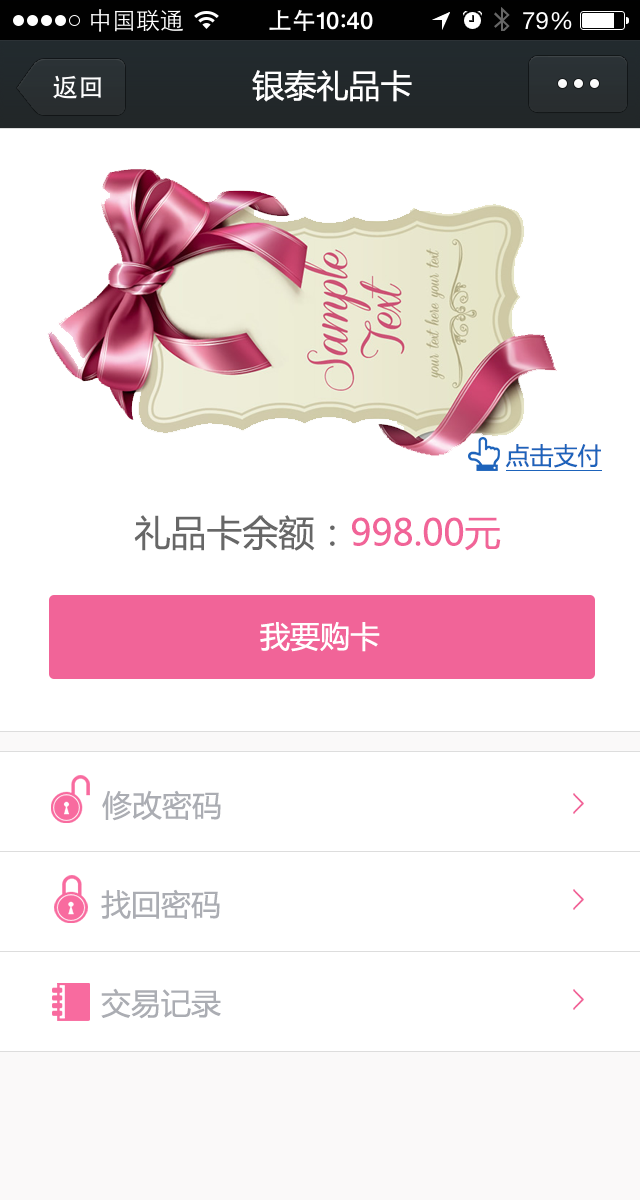
<style>
.page{position:relative;width:640px;height:1200px;background:#ffffff}
.page>*{position:absolute;margin:0}
.t1{font:32px "MicrosoftYaHei";color:#ffffff}
.t2{font:24px "MicrosoftYaHei";color:#1d63bb}
.t3{font:36px "MicrosoftYaHei";color:#f16498}
.t4{font:36px "MicrosoftYaHei";color:#676767}
.t5{font:30px "MicrosoftYaHei";color:#ffffff}
.t6{font:30px "MicrosoftYaHei";color:#abadb3}
</style>
<div class="page">
<p class="t1" style="left:252px;top:70px;width:160px;height:32px">银泰礼品卡</p>
<p class="t2" style="left:505px;top:444px;width:96px;height:24px">点击支付</p>
<p class="t3" style="left:134px;top:515px;width:367px;height:36px"><span class="t4">礼品卡余额：</span>998.00元</p>
<p class="t5" style="left:260px;top:622px;width:120px;height:30px">我要购卡</p>
<p class="t6" style="left:102px;top:790px;width:119px;height:31px">修改密码</p>
<p class="t6" style="left:101px;top:889px;width:119px;height:30px">找回密码</p>
<p class="t6" style="left:101px;top:988px;width:120px;height:31px">交易记录</p>
</div>
